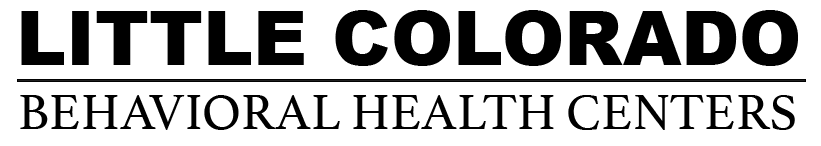
<style>
.page{position:relative;width:821px;height:146px;background:#ffffff}
.page>*{position:absolute;margin:0}
.t1{font:75px "Arial-Black";color:#000000}
.t2{font:52.1px "Athelas-Regular";color:#000000}
</style>
<div class="page">
<p class="t1" style="left:21px;top:10px;width:777px;height:56px">LITTLE COLORADO</p>
<p class="t2" style="left:20px;top:95px;width:775px;height:35px">BEHAVIORAL HEALTH CENTERS</p>
</div>
